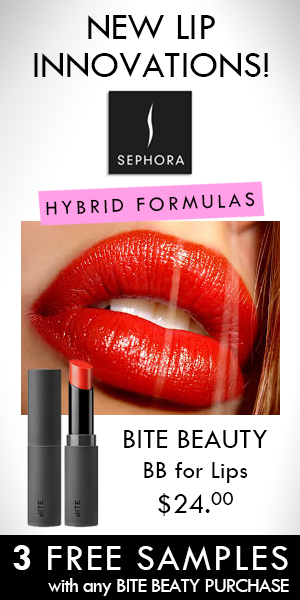
<style>
.page{position:relative;width:300px;height:600px;background:#ffffff}
.page>*{position:absolute;margin:0}
.t1{font:37.5px/37.5px "TwCenMT-Regular";color:#000000}
.t2{font:20.8px "TwCenMT-Regular";letter-spacing:0.16em;color:#000000}
.t3{font:29.2px "TwCenMT-Regular";color:#000000}
.t4{font:25px "TwCenMT-Regular";color:#000000}
.t5{font:20.8px "TwCenMT-Regular";color:#000000}
.t6{font:37.5px "TwCenMT-Regular";letter-spacing:0.06em;color:#ffffff}
.t7{font:37.5px "TwCenMT-Bold";letter-spacing:0.06em;color:#ffffff}
.t8{font:20.8px "TwCenMT-Regular";letter-spacing:-0.04em;color:#ffffff}
</style>
<div class="page">
<p class="t1" style="left:34px;top:15px;width:235px;height:62px;text-align:center">NEW LIP<br>INNOVATIONS!</p>
<p class="t2" style="left:46px;top:192px;width:209px;height:24px;rotate:-2deg">HYBRID FORMULAS</p>
<p class="t3" style="left:124px;top:430px;width:144px;height:86px;text-align:center">BITE BEAUTY<br><span class="t4">BB for Lips</span><br>$24.<span class="t5">00</span></p>
<p class="t6" style="left:13px;top:545px;width:275px;height:25px"><span class="t7">3</span> FREE SAMPLES</p>
<p class="t8" style="left:48px;top:578px;width:241px;height:18px">with any BITE BEATY PURCHASE</p>
</div>
